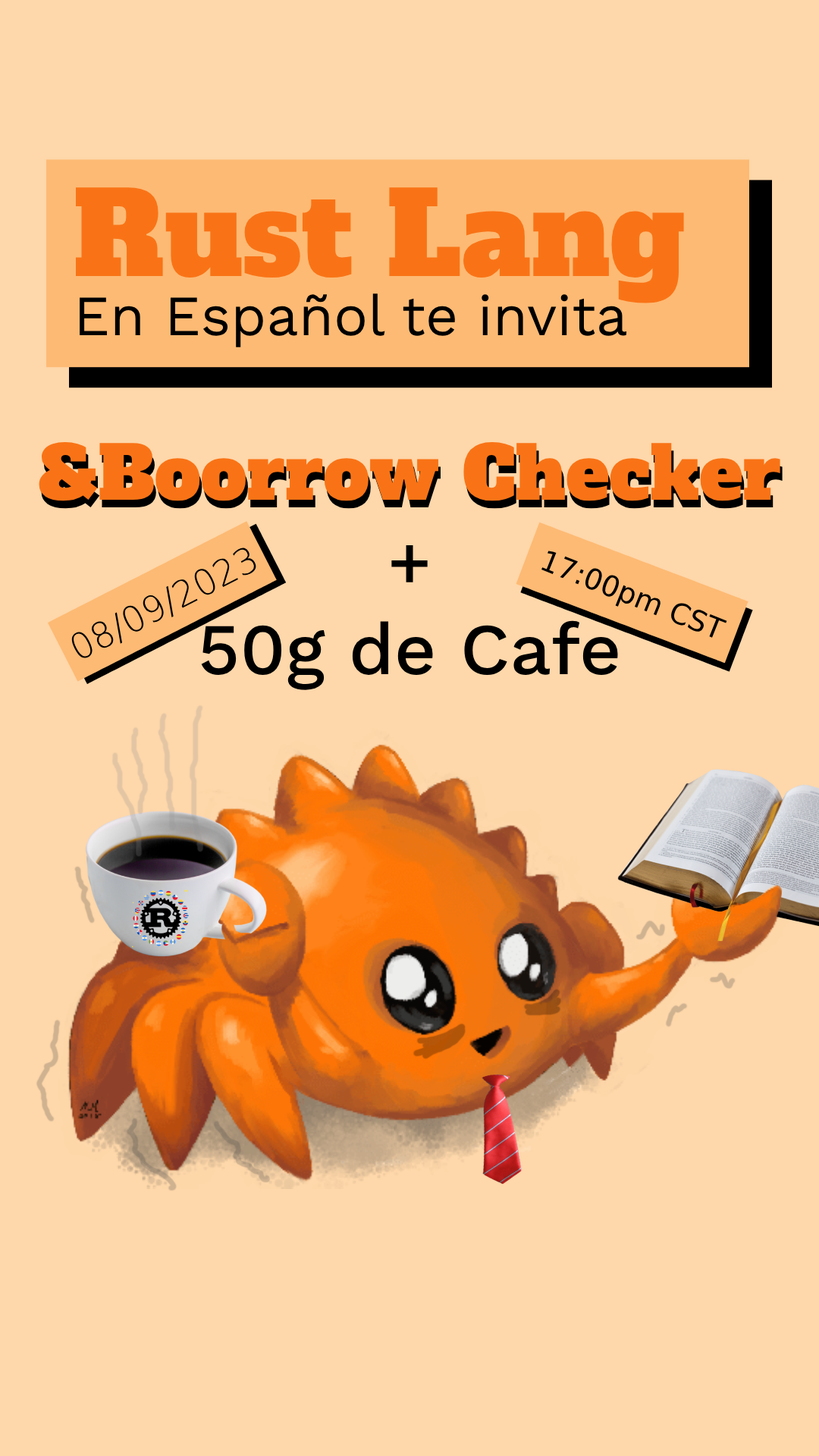
<style>
.page{position:relative;width:819px;height:1456px;background:#fed7aa}
.page>*{position:absolute;margin:0}
.t1{font:113.7px "AlfaSlabOne-Regular";color:#f97316}
.t2{font:56.9px "WorkSans-Regular";color:#000000}
.t3{font:72.8px "AlfaSlabOne-Regular";color:#f97316}
.t4{font:72.8px "WorkSans-Medium";color:#000000}
.t5{font:72.8px "AlfaSlabOne-Regular"}
.t6{font:35.8px "DejaVuSans-ExtraLight";color:#000000}
.t7{font:28.8px "DejaVuSans";color:#000000}
</style>
<div class="page">
<p class="t1" style="left:76px;top:187px;width:608px;height:116px">Rust Lang</p>
<p class="t2" style="left:80px;top:293px;width:547px;height:54px">En Español te invita</p>
<p class="t3" style="left:39px;top:441px;width:741px;height:249px;text-align:center">&amp;Boorrow Checker<br><span class="t4">+<br>50g de Cafe</span></p>
<p class="t5" style="left:41px;top:449px;width:742px;height:60px">&amp;Boorrow Checker</p>
<p class="t6" style="left:71px;top:548px;width:185px;height:110px;rotate:-27deg">08/09/2023</p>
<p class="t7" style="left:541px;top:551px;width:186px;height:87px;rotate:22deg">17:00pm CST</p>
</div>
